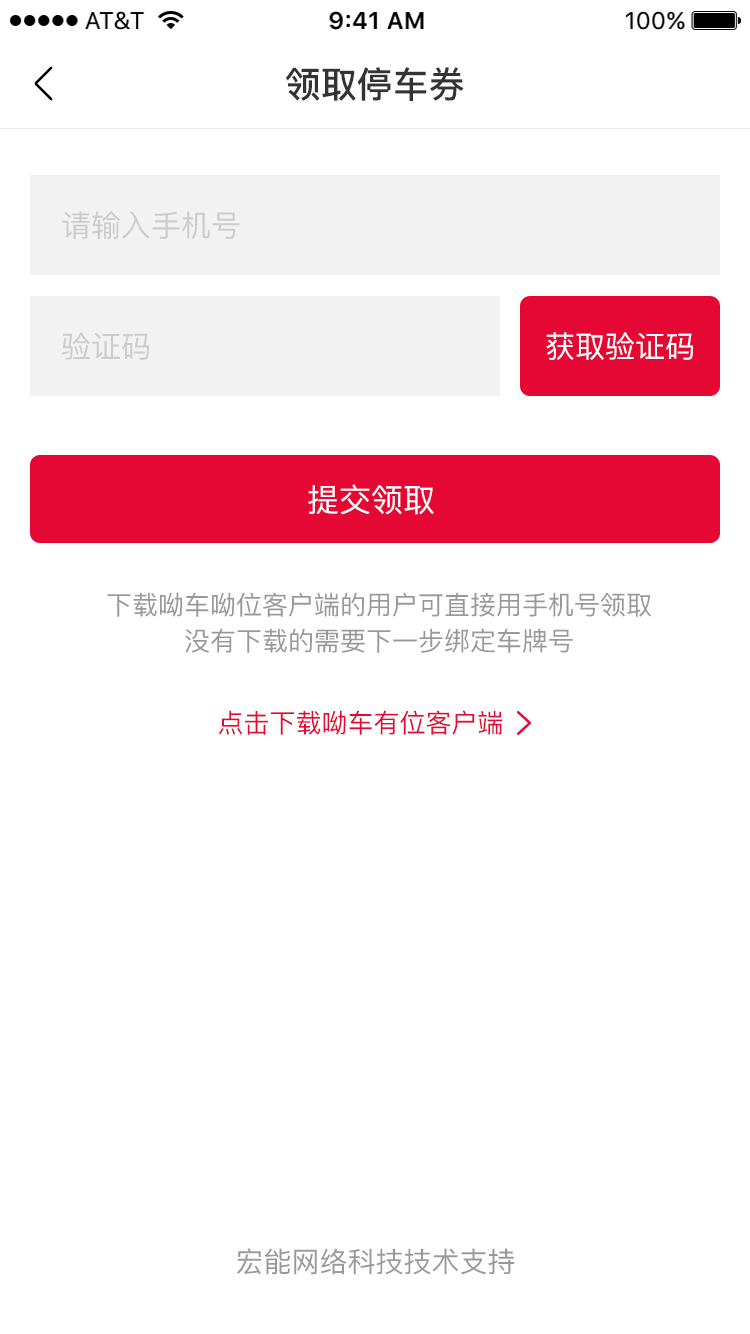
<style>
.page{position:relative;width:750px;height:1334px;background:#ffffff}
.page>*{position:absolute;margin:0}
.t1{font:36px "PingFang-SC-Bold";color:#333333}
.t2{font:30px "PingFang-SC-Medium";color:#cccccc}
.t3{font:30px "PingFang-SC-Medium";color:#ffffff}
.t4{font:32px "PingFang-SC-Medium";color:#ffffff}
.t5{font:26px/36px "PingFang-SC-Medium";color:#999999}
.t6{font:26px "PingFang-SC-Medium";color:#e50834}
.t7{font:28px "PingFang-SC-Medium";color:#999999}
</style>
<div class="page">
<p class="t1" style="left:285px;top:67px;width:179px;height:34px">领取停车券</p>
<p class="t2" style="left:62px;top:211px;width:178px;height:28px">请输入手机号</p>
<p class="t2" style="left:62px;top:332px;width:87px;height:28px">验证码</p>
<p class="t3" style="left:546px;top:332px;width:147px;height:28px">获取验证码</p>
<p class="t4" style="left:308px;top:484px;width:126px;height:31px">提交领取</p>
<p class="t5" style="left:107px;top:592px;width:544px;height:61px;text-align:center">下载呦车呦位客户端的用户可直接用手机号领取<br>没有下载的需要下一步绑定车牌号</p>
<p class="t6" style="left:218px;top:710px;width:285px;height:25px">点击下载呦车有位客户端</p>
<p class="t7" style="left:237px;top:1248px;width:278px;height:27px">宏能网络科技技术支持</p>
</div>
